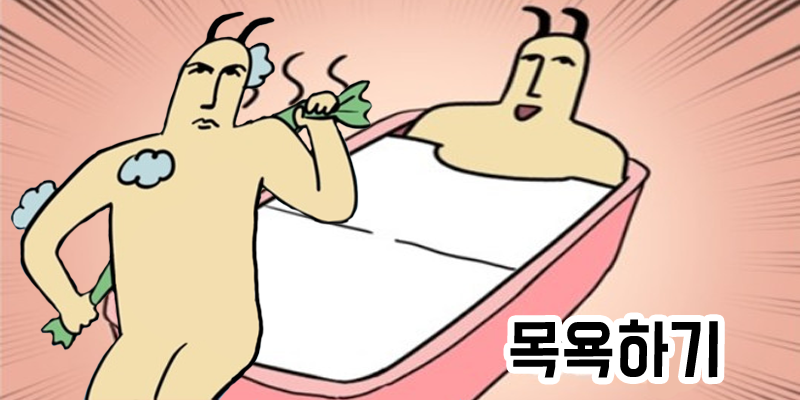
<style>
.page{position:relative;width:800px;height:400px}
.page>*{position:absolute;margin:0}
.t1{font:59px "BMDoHyeon";color:#000000;scale:0.95 1}
</style>
<div class="page">
<p class="t1" style="left:510px;top:319px;width:208px;height:59px">목욕하기</p>
</div>
